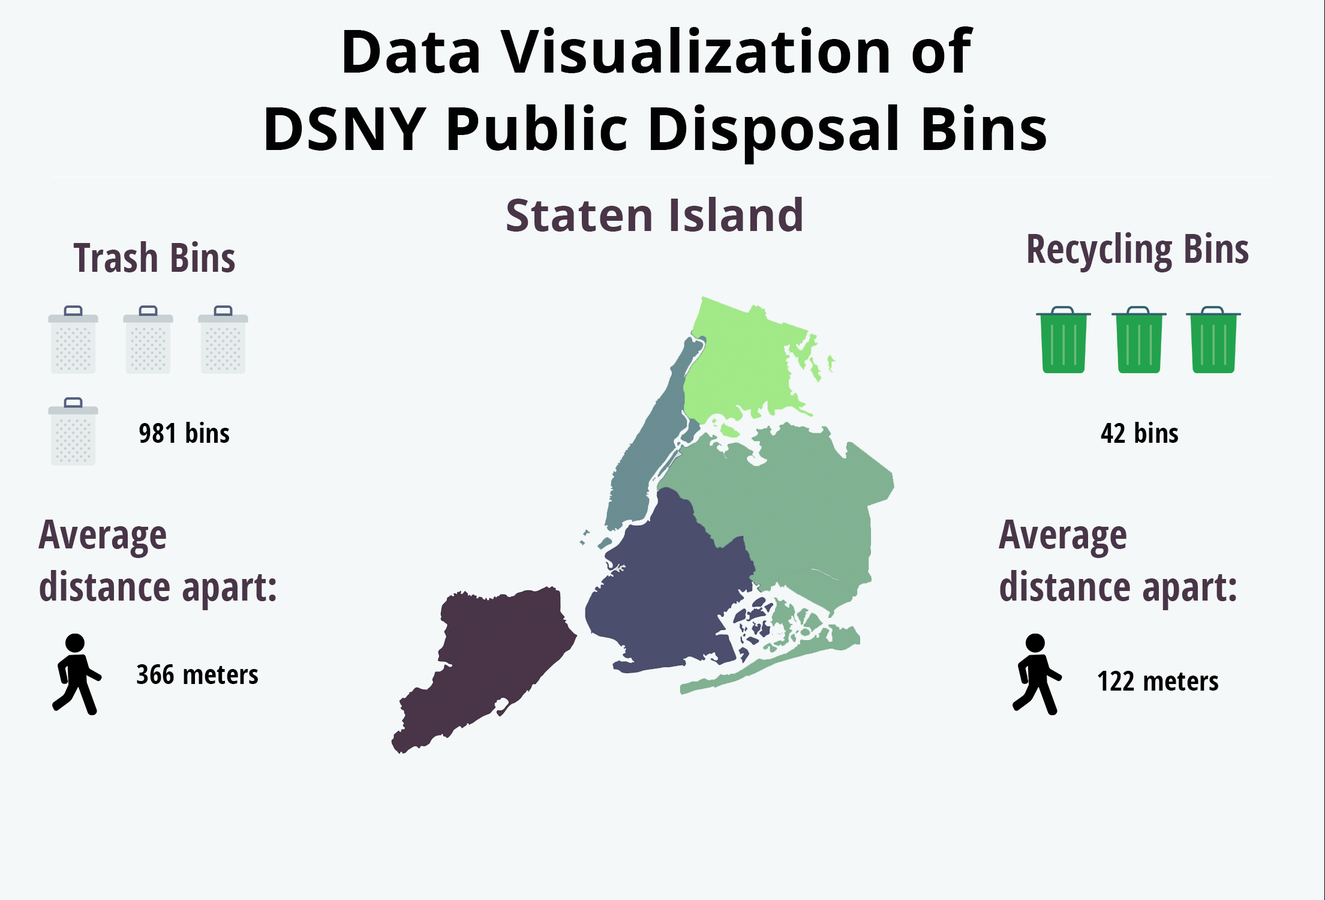
<style>
.page{position:relative;width:1325px;height:900px;background:#f4f8f8}
.page>*{position:absolute;margin:0}
.t1{font:60px/77.7px "OpenSans-Bold";letter-spacing:0.01em;color:#020202}
.t2{font:45px "OpenSans-Bold";letter-spacing:0.01em;color:#493547}
.t3{font:40px "OpenSans-CondensedBold";letter-spacing:0.01em;color:#493548}
.t4{font:40px "OpenSans-CondensedBold";letter-spacing:0.01em;color:#493547}
.t5{font:27.5px "OpenSans-CondensedBold";letter-spacing:0.01em;color:#020202}
.t6{font:40px/52.7px "OpenSans-CondensedBold";letter-spacing:0.01em;color:#493548}
</style>
<div class="page">
<p class="t1" style="left:266px;top:26px;width:780px;height:138px;text-align:center">Data Visualization of <br>DSNY Public Disposal Bins</p>
<p class="t2" style="left:507px;top:197px;width:295px;height:35px">Staten Island</p>
<p class="t3" style="left:1028px;top:232px;width:221px;height:40px">Recycling Bins</p>
<p class="t4" style="left:73px;top:241px;width:162px;height:31px">Trash Bins</p>
<p class="t5" style="left:139px;top:422px;width:90px;height:21px">981 bins</p>
<p class="t5" style="left:1101px;top:422px;width:77px;height:21px">42 bins</p>
<p class="t6" style="left:38px;top:520px;width:238px;height:90px">Average <br>distance apart:</p>
<p class="t6" style="left:999px;top:520px;width:237px;height:90px">Average <br>distance apart:</p>
<p class="t5" style="left:137px;top:664px;width:121px;height:20px">366 meters</p>
<p class="t5" style="left:1098px;top:671px;width:120px;height:19px">122 meters</p>
</div>
